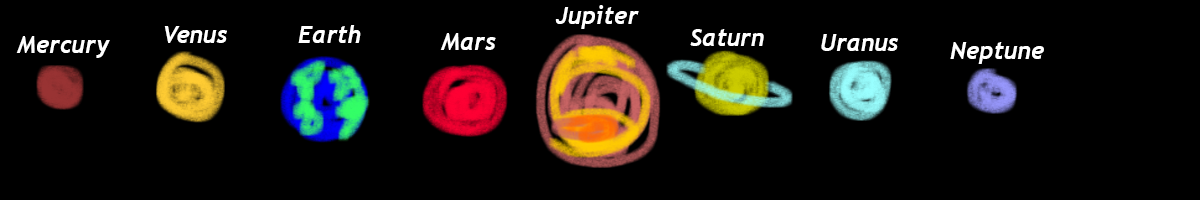
<style>
.page{position:relative;width:1200px;height:200px;background:#000000}
.page>*{position:absolute;margin:0}
.t1{font:24px "Trebuchet-BoldItalic";color:#ffffff}
</style>
<div class="page">
<p class="t1" style="left:555px;top:5px;width:84px;height:24px">Jupiter</p>
<p class="t1" style="left:164px;top:26px;width:63px;height:17px">Venus</p>
<p class="t1" style="left:298px;top:25px;width:63px;height:18px">Earth</p>
<p class="t1" style="left:690px;top:29px;width:74px;height:17px">Saturn</p>
<p class="t1" style="left:16px;top:36px;width:94px;height:22px">Mercury</p>
<p class="t1" style="left:440px;top:33px;width:56px;height:17px">Mars</p>
<p class="t1" style="left:821px;top:34px;width:77px;height:17px">Uranus</p>
<p class="t1" style="left:950px;top:42px;width:94px;height:22px">Neptune</p>
</div>
